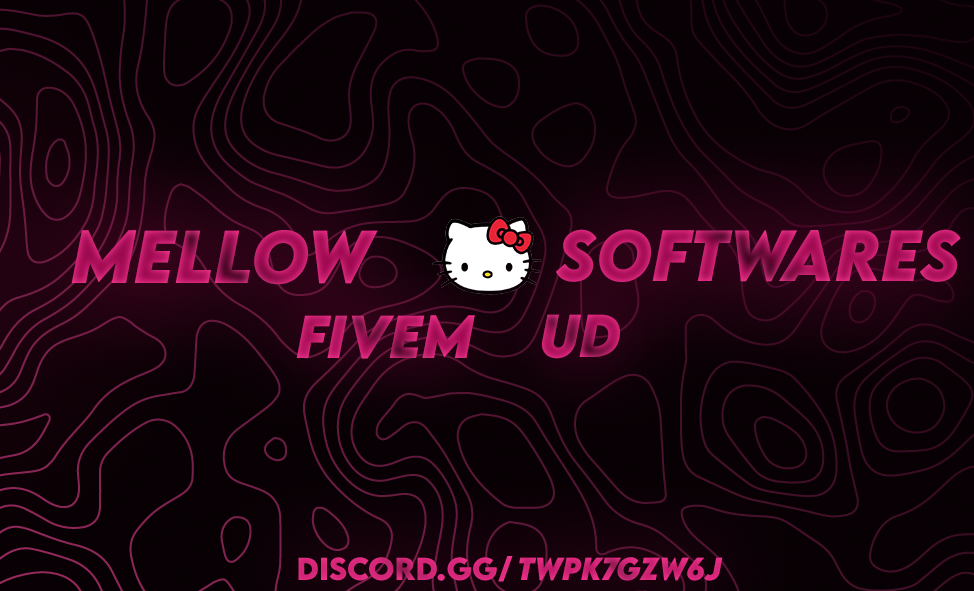
<style>
.page{position:relative;width:974px;height:591px}
.page>*{position:absolute;margin:0}
.t1{font:66.5px "LEMONMILK-BoldItalic"}
.t2{font:64.1px "LEMONMILK-BoldItalic"}
.t3{font:53.7px "LEMONMILK-BoldItalic"}
.t4{font:28.3px "LEMONMILK-Bold";color:#d7277a}
.t5{font:28.3px "LEMONMILK-BoldItalic";color:#d52678}
</style>
<div class="page">
<p class="t1" style="left:71px;top:230px;width:307px;height:55px">mellow</p>
<p class="t2" style="left:556px;top:229px;width:405px;height:53px">softwares</p>
<p class="t3" style="left:296px;top:315px;width:179px;height:44px">fivem</p>
<p class="t3" style="left:542px;top:314px;width:78px;height:45px">ud</p>
<p class="t4" style="left:298px;top:556px;width:215px;height:26px">discord.gg/</p>
<p class="t5" style="left:519px;top:557px;width:204px;height:24px">tWpk7GZW6J</p>
</div>
